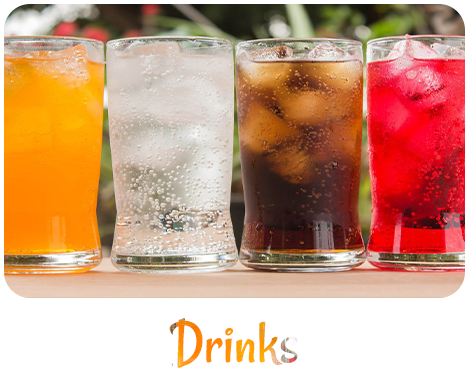
<style>
.page{position:relative;width:468px;height:380px;background:#ffffff}
.page>*{position:absolute;margin:0}
.t1{font:63px "Rancho-Regular"}
</style>
<div class="page">
<p class="t1" style="left:169px;top:318px;width:129px;height:51px">Drinks</p>
</div>
